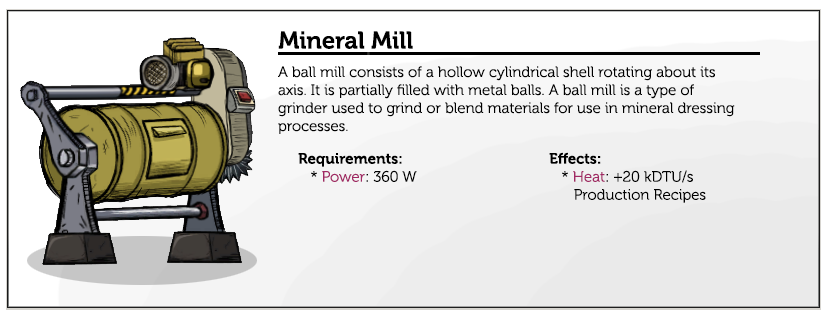
<style>
.page{position:relative;width:830px;height:320px;background:#ffffff}
.page>*{position:absolute;margin:0}
.t1{font:24px "Museo-700";color:#000000}
.t2{font:15px "Museo-300";color:#000000}
.t3{font:15px "Museo-700";color:#000000}
.t4{font:15px "Museo-300";color:#a12864}
</style>
<div class="page">
<p class="t1" style="left:278px;top:31px;width:135px;height:18px">Mineral Mill</p>
<p class="t2" style="left:278px;top:66px;width:457px;height:68px">A ball mill consists of a hollow cylindrical shell rotating about its axis. It is partially filled with metal balls. A ball mill is a type of grinder used to grind or blend materials for use in mineral dressing processes.</p>
<p class="t3" style="left:298px;top:153px;width:119px;height:29px">Requirements:<br><span class="t2">   * </span><span class="t4">Power</span><span class="t2">: 360 W</span></p>
<p class="t2" style="left:549px;top:152px;width:157px;height:51px"><span class="t3">Effects:</span><br>   * <span class="t4">Heat</span>: +20 kDTU/s<br>      Production Recipes</p>
</div>
